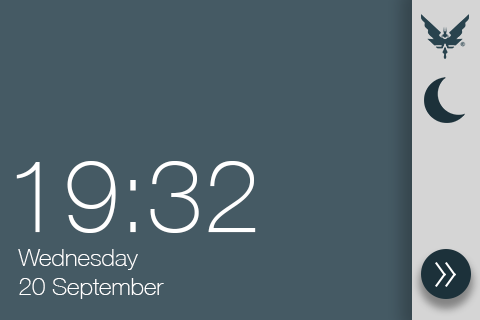
<style>
.page{position:relative;width:480px;height:320px;background:#455a64}
.page>*{position:absolute;margin:0}
.t1{font:101.4px "HelveticaNeue-Thin";color:#ffffff}
.t2{font:24.1px "HelveticaNeue-Thin";color:#ffffff}
</style>
<div class="page">
<p class="t1" style="left:16px;top:161px;width:240px;height:72px">19:32</p>
<p class="t2" style="left:18px;top:249px;width:146px;height:50px">Wednesday<br>20 September</p>
</div>
